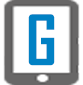
<style>
.page{position:relative;width:83px;height:85px;background:#ffffff}
.page>*{position:absolute;margin:0}
.t1{font:66.7px "AgencyFB-Bold";color:#0181c4}
</style>
<div class="page">
<p class="t1" style="left:28px;top:14px;width:27px;height:52px">G</p>
</div>
